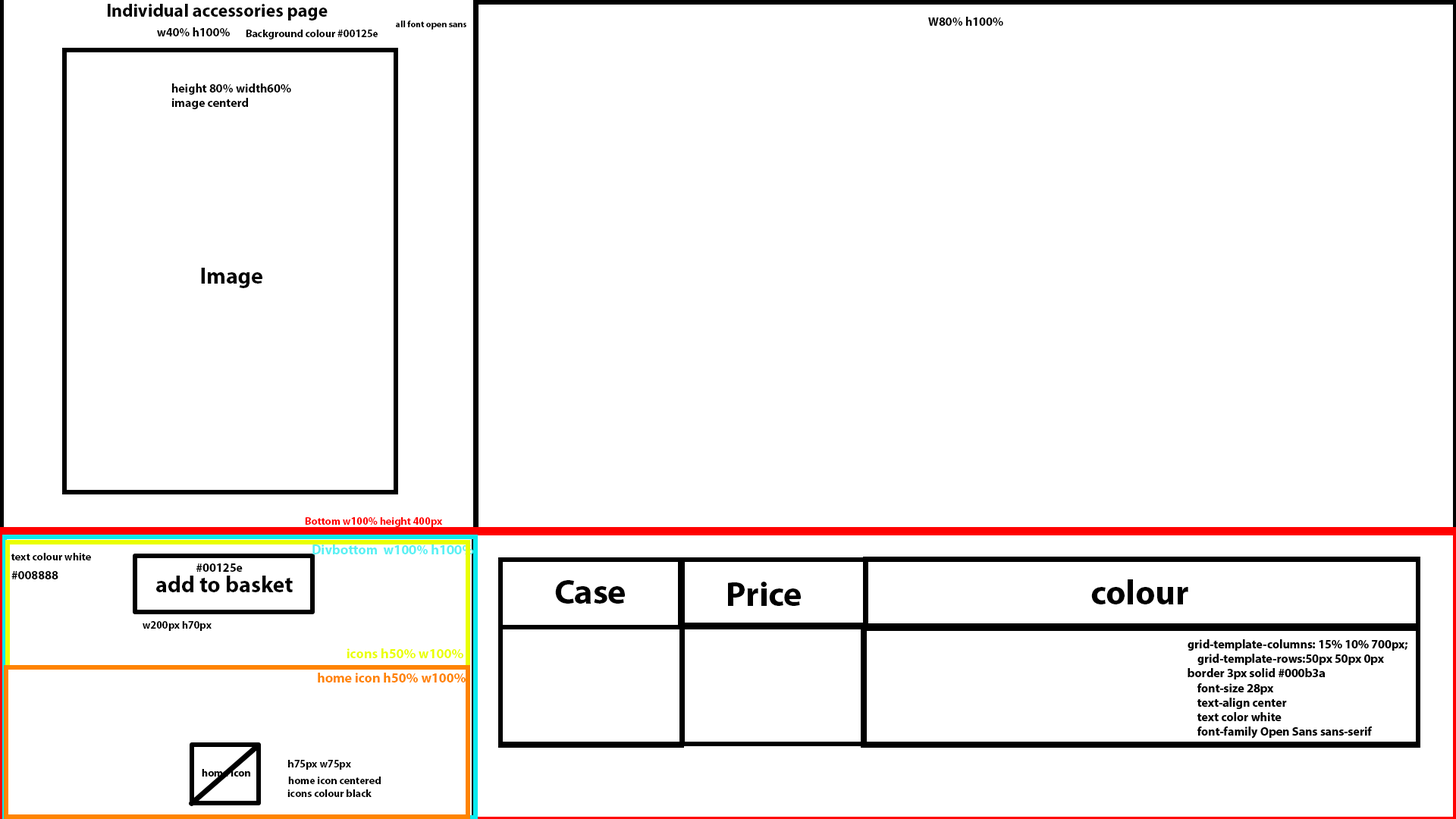
<style>
.page{position:relative;width:1456px;height:819px;background:#ffffff}
.page>*{position:absolute;margin:0}
.t1{font:18.2px "MyriadPro-Bold";color:#000000}
.t2{font:12.1px "MyriadPro-Bold";color:#000000}
.t3{font:10.6px "MyriadPro-Bold";color:#000000}
.t4{font:9.1px "MyriadPro-Bold";color:#000000}
.t5{font:22.7px "MyriadPro-Bold";color:#000000}
.t6{font:10.6px "MyriadPro-Bold";color:#ff0000}
.t7{font:13.6px "MyriadPro-Bold";color:#5af1f4}
.t8{font:34.8px "MyriadPro-Bold";color:#000000}
.t9{font:13.6px "MyriadPro-Bold";color:#eaff00}
.t10{font:13.6px "MyriadPro-Bold";color:#ff8400}
</style>
<div class="page">
<p class="t1" style="left:108px;top:4px;width:220px;height:16px">Individual accessories page</p>
<p class="t2" style="left:928px;top:17px;width:75px;height:9px">W80% h100%</p>
<p class="t2" style="left:157px;top:27px;width:73px;height:9px">w40% h100%</p>
<p class="t3" style="left:246px;top:30px;width:132px;height:9px">Background colour #00125e</p>
<p class="t4" style="left:395px;top:20px;width:71px;height:10px">all font open sans</p>
<p class="t2" style="left:172px;top:83px;width:119px;height:26px">height 80% width60%<br>image centerd</p>
<p class="t5" style="left:201px;top:268px;width:61px;height:20px">Image</p>
<p class="t6" style="left:305px;top:517px;width:138px;height:10px">Bottom w100% height 400px</p>
<p class="t7" style="left:312px;top:544px;width:161px;height:11px">Divbottom  w100% h100%</p>
<p class="t3" style="left:11px;top:553px;width:80px;height:7px">text colour white</p>
<p class="t2" style="left:196px;top:563px;width:47px;height:9px">#00125e</p>
<p class="t2" style="left:11px;top:571px;width:47px;height:8px">#008888</p>
<p class="t5" style="left:156px;top:576px;width:137px;height:16px">add to basket</p>
<p class="t8" style="left:555px;top:580px;width:70px;height:24px">Case</p>
<p class="t8" style="left:728px;top:582px;width:73px;height:24px">Price</p>
<p class="t8" style="left:1091px;top:579px;width:97px;height:25px">colour</p>
<p class="t3" style="left:143px;top:621px;width:69px;height:10px">w200px h70px</p>
<p class="t2" style="left:1188px;top:639px;width:219px;height:100px">grid-template-columns: 15% 10% 700px;<br>    grid-template-rows:50px 50px 0px<br>border 3px solid #000b3a<br>    font-size 28px<br>    text-align center<br>    text color white<br>    font-family Open Sans sans-serif</p>
<p class="t9" style="left:347px;top:648px;width:116px;height:11px">icons h50% w100%</p>
<p class="t10" style="left:318px;top:673px;width:148px;height:9px">home icon h50% w100%</p>
<p class="t3" style="left:288px;top:760px;width:63px;height:10px">h75px w75px</p>
<p class="t3" style="left:288px;top:777px;width:93px;height:7px">home icon centered</p>
<p class="t3" style="left:287px;top:789px;width:85px;height:8px">icons colour black</p>
</div>
